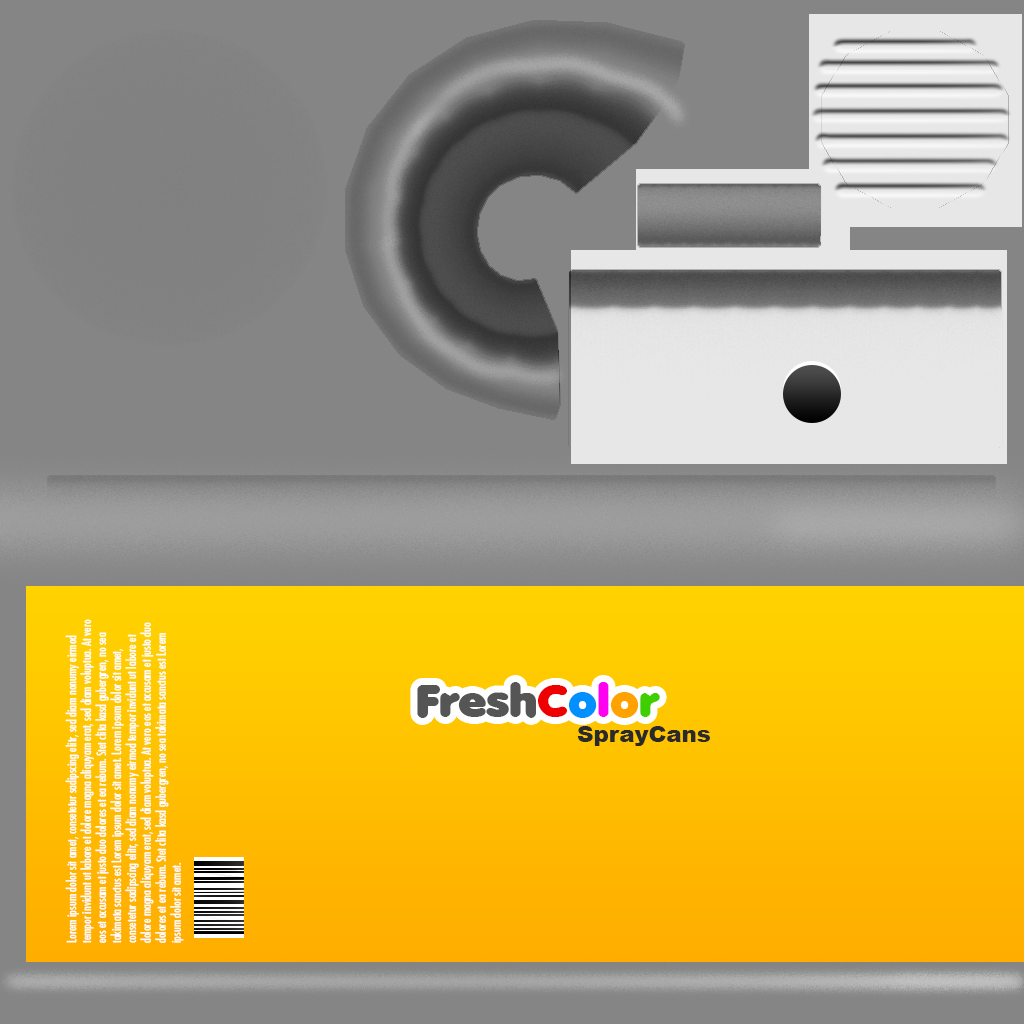
<style>
.page{position:relative;width:1024px;height:1024px;background:#858585}
.page>*{position:absolute;margin:0}
.t1{font:12.4px "Futura-CondensedMedium";color:#ffffff;scale:0.96 1}
.t2{font:44.3px "AnjaElianeaccent-Nornal";color:#555555;scale:1.03 1}
.t3{font:44.3px "AnjaElianeaccent-Nornal";color:#ee0000;scale:1.03 1}
.t4{font:44.3px "AnjaElianeaccent-Nornal";color:#0090ff;scale:1.03 1}
.t5{font:44.3px "AnjaElianeaccent-Nornal";color:#ff00f0;scale:1.03 1}
.t6{font:44.3px "AnjaElianeaccent-Nornal";color:#ffa200;scale:1.03 1}
.t7{font:44.3px "AnjaElianeaccent-Nornal";color:#3fcf00;scale:1.03 1}
.t8{font:22.2px "Arial-Black";color:#2a2a2a;scale:1.03 1}
</style>
<div class="page">
<p class="t1" style="left:65px;top:619px;width:119px;height:324px;rotate:-90deg">Lorem ipsum dolor sit amet, consetetur sadipscing elitr, sed diam nonumy eirmod tempor invidunt ut labore et dolore magna aliquyam erat, sed diam voluptua. At vero eos et accusam et justo duo dolores et ea rebum. Stet clita kasd gubergren, no sea takimata sanctus est Lorem ipsum dolor sit amet. Lorem ipsum dolor sit amet, consetetur sadipscing elitr, sed diam nonumy eirmod tempor invidunt ut labore et dolore magna aliquyam erat, sed diam voluptua. At vero eos et accusam et justo duo dolores et ea rebum. Stet clita kasd gubergren, no sea takimata sanctus est Lorem ipsum dolor sit amet.</p>
<p class="t2" style="left:417px;top:682px;width:243px;height:36px">Fresh<span class="t3">C</span><span class="t4">o</span><span class="t5">l</span><span class="t6">o</span><span class="t7">r</span></p>
<p class="t8" style="left:577px;top:726px;width:133px;height:20px">SprayCans</p>
</div>
